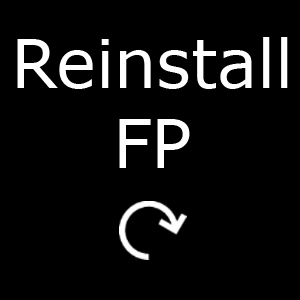
<style>
.page{position:relative;width:300px;height:300px;background:#000000}
.page>*{position:absolute;margin:0}
.t1{font:66.7px "Verdana";color:#ffffff}
</style>
<div class="page">
<p class="t1" style="left:17px;top:37px;width:271px;height:131px;text-align:center">Reinstall<br>FP</p>
</div>
